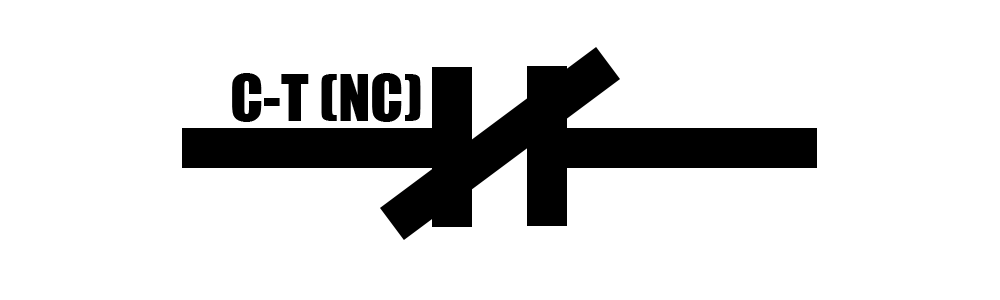
<style>
.page{position:relative;width:1000px;height:300px;background:#ffffff}
.page>*{position:absolute;margin:0}
.t1{font:60px "Impact";color:#000000}
</style>
<div class="page">
<p class="t1" style="left:232px;top:73px;width:189px;height:49px">C-T (NC)</p>
</div>
